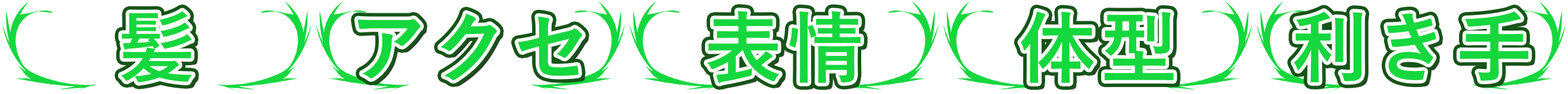
<style>
.page{position:relative;width:1568px;height:94px;background:#ffffff}
.page>*{position:absolute;margin:0}
.t1{font:77.6px "YuGothic-Bold";letter-spacing:0.06em;color:#15d73e}
</style>
<div class="page">
<p class="t1" style="left:121px;top:11px;width:72px;height:71px">髪</p>
<p class="t1" style="left:357px;top:13px;width:226px;height:67px">アクセ</p>
<p class="t1" style="left:707px;top:11px;width:154px;height:72px">表情</p>
<p class="t1" style="left:1020px;top:11px;width:154px;height:72px">体型</p>
<p class="t1" style="left:1294px;top:11px;width:235px;height:71px">利き手</p>
</div>
